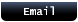
<style>
.page{position:relative;width:78px;height:22px;background:#000000}
.page>*{position:absolute;margin:0}
.t1{font:11px "LucidaConsole";color:#ffffff}
</style>
<div class="page">
<p class="t1" style="left:24px;top:6px;width:30px;height:9px">Email</p>
</div>
